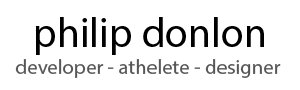
<style>
.page{position:relative;width:300px;height:90px;background:#ffffff}
.page>*{position:absolute;margin:0}
.t1{font:41.7px "MyriadPro-Regular";color:#000000}
.t2{font:20.8px "MyriadPro-Regular";color:#565656}
</style>
<div class="page">
<p class="t1" style="left:35px;top:17px;width:229px;height:38px">philip donlon</p>
<p class="t2" style="left:15px;top:59px;width:266px;height:19px">developer - athelete - designer</p>
</div>
